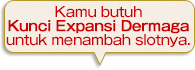
<style>
.page{position:relative;width:195px;height:70px;background:#f6eee5}
.page>*{position:absolute;margin:0}
.t1{font:14px/14px "GothicMB101Pro-Medium";letter-spacing:-0.04em;color:#cc0000}
.t2{font:14px/14px "GothicMB101Pro-Medium";letter-spacing:-0.04em;color:#cc0000;font-weight:bold}
</style>
<div class="page">
<p class="t1" style="left:6px;top:6px;width:184px;height:41px;text-align:center">Kamu butuh<br><span class="t2">Kunci Expansi Dermaga<br></span>untuk menambah slotnya.</p>
</div>
